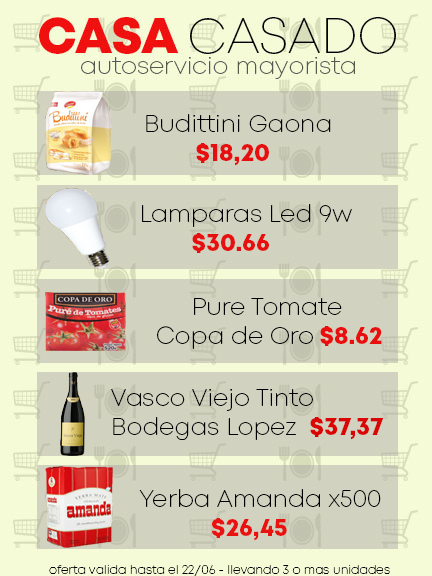
<style>
.page{position:relative;width:432px;height:576px;background:#d1d3c0}
.page>*{position:absolute;margin:0}
.t1{font:24px "Mont-ExtraLightDEMO";color:#000000}
.t2{font:24px "Mont-HeavyDEMO";color:#e60e0e}
.t3{font:24px "Mont-HeavyDEMO";color:#e71010}
.t4{font:24px "Mont-HeavyDEMO";color:#ea0f0f}
.t5{font:24px "Mont-HeavyDEMO";color:#da0606}
.t6{font:24px "Mont-HeavyDEMO";color:#ea1111}
.t7{font:12px "Mont-ExtraLightDEMO";color:#000000}
.t8{font:12px "LucidaConsole";color:#000000}
</style>
<div class="page">
<p class="t1" style="left:146px;top:114px;width:185px;height:52px">Budittini Gaona <br><span class="t2">    $18,20</span></p>
<p class="t1" style="left:142px;top:204px;width:210px;height:49px">Lamparas Led 9w<br><span class="t3">    $30.66</span></p>
<p class="t1" style="left:157px;top:298px;width:225px;height:51px">Pure Tomate <br>Copa de Oro<span class="t4"> $8.62</span></p>
<p class="t1" style="left:111px;top:389px;width:272px;height:51px">Vasco Viejo Tinto <br>Bodegas Lopez  <span class="t5">$37,37</span></p>
<p class="t1" style="left:139px;top:489px;width:242px;height:52px">Yerba Amanda x500<br><span class="t6">  $26,45</span></p>
<p class="t7" style="left:49px;top:564px;width:341px;height:12px">oferta valida hasta el 22<span class="t8">/</span>06 - llevando 3 o mas unidades</p>
</div>
